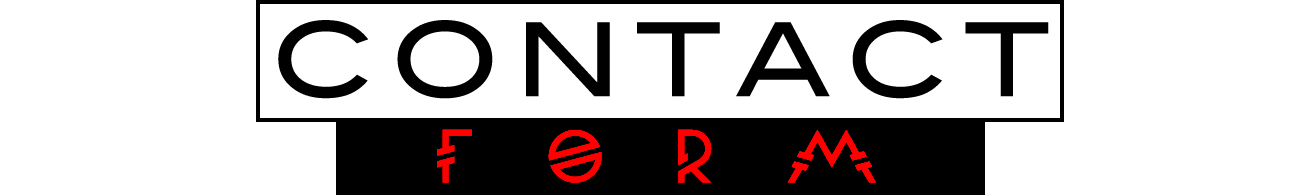
<style>
.page{position:relative;width:1300px;height:195px;background:#ffffff}
.page>*{position:absolute;margin:0}
.t1{font:101.6px "BlairMdITCTTMedium";letter-spacing:0.13em;color:#000000}
.t2{font:70px "Moondance";letter-spacing:1em;color:#ff0000}
</style>
<div class="page">
<p class="t1" style="left:278px;top:20px;width:771px;height:79px">CONTACT</p>
<p class="t2" style="left:437px;top:129px;width:439px;height:54px">FORM</p>
</div>
